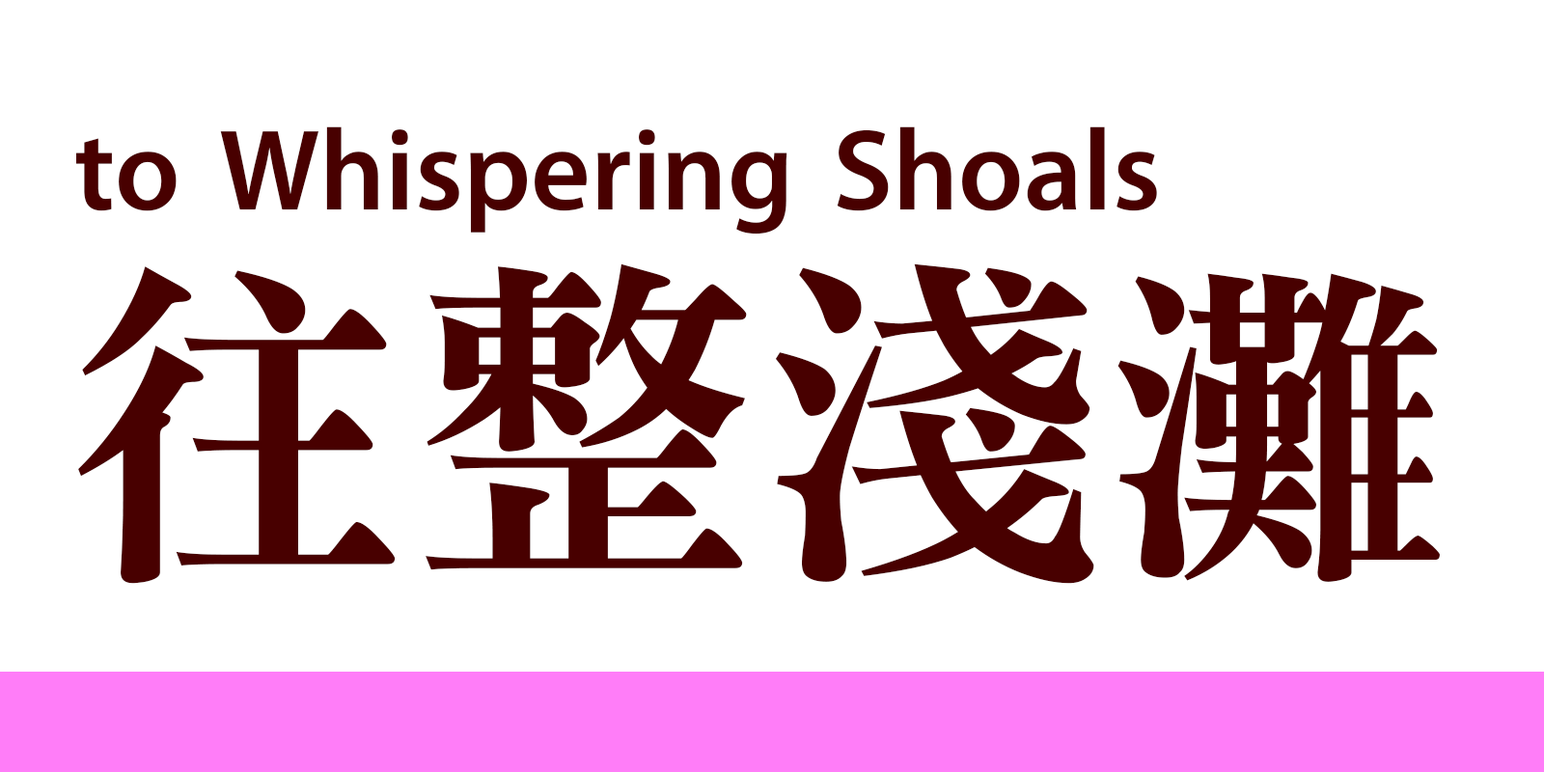
<style>
.page{position:relative;width:1544px;height:772px;background:#ffffff}
.page>*{position:absolute;margin:0}
.t1{font:115.8px "MTR-Sung";color:#480000}
.t2{font:347.5px "MTR-Sung";color:#480000}
</style>
<div class="page">
<p class="t1" style="left:76px;top:126px;width:1081px;height:109px">to Whispering Shoals</p>
<p class="t2" style="left:78px;top:263px;width:1362px;height:321px">往整淺灘</p>
</div>
